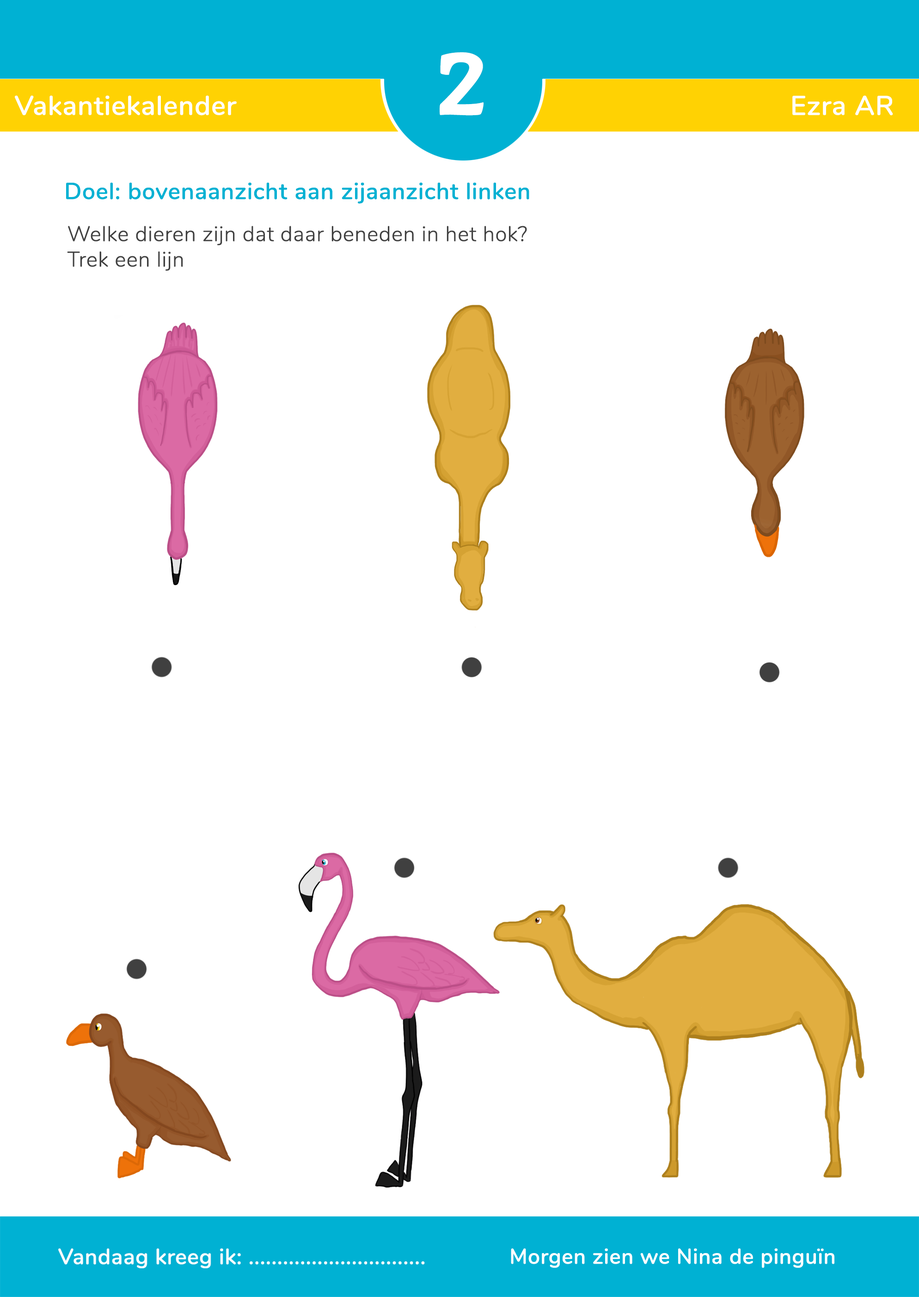
<style>
.page{position:relative;width:919px;height:1297px;background:#ffffff}
.page>*{position:absolute;margin:0}
.t1{font:92.5px "BubblegumSans-Regular";color:#ffffff;font-weight:bold}
.t2{font:27px "Nunito-SemiBold";color:#ffffff;font-weight:bold}
.t3{font:23.1px "Nunito-SemiBold";color:#00b1d3;font-weight:bold}
.t4{font:21.2px "Nunito-Light";color:#404040;font-weight:bold}
.t5{font:21.2px "Nunito-SemiBold";color:#ffffff;font-weight:bold}
</style>
<div class="page">
<p class="t1" style="left:440px;top:52px;width:44px;height:64px">2</p>
<p class="t2" style="left:15px;top:95px;width:222px;height:21px">Vakantiekalender</p>
<p class="t2" style="left:793px;top:95px;width:101px;height:21px">Ezra AR</p>
<p class="t3" style="left:66px;top:182px;width:464px;height:22px">Doel: bovenaanzicht aan zijaanzicht linken</p>
<p class="t4" style="left:67px;top:226px;width:460px;height:45px">Welke dieren zijn dat daar beneden in het hok?<br>Trek een lijn</p>
<p class="t5" style="left:511px;top:1248px;width:324px;height:20px">Morgen zien we Nina de pinguïn</p>
</div>
